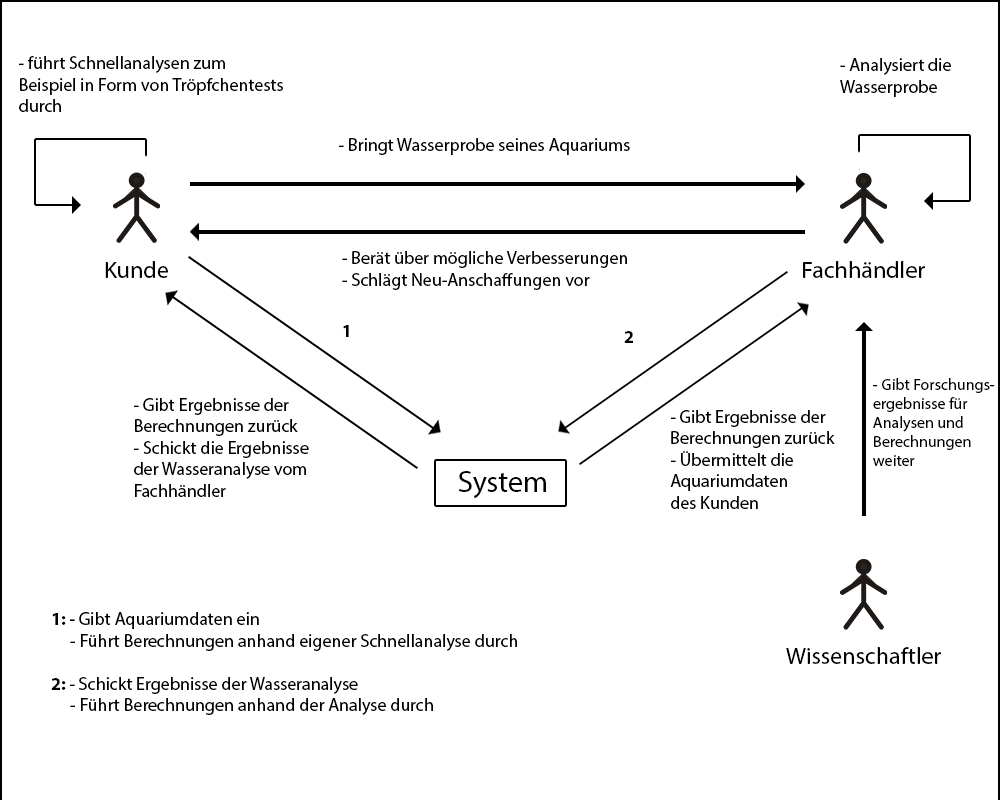
<style>
.page{position:relative;width:1000px;height:800px;background:#ffffff}
.page>*{position:absolute;margin:0}
.t1{font:18px "MyriadPro-Regular";color:#000000}
.t2{font:23.8px "MyriadPro-Regular";color:#000000}
.t3{font:23.9px "MyriadPro-Regular";color:#000000}
.t4{font:18px "MyriadPro-Bold";color:#000000}
.t5{font:16px "MyriadPro-Regular";color:#000000}
.t6{font:30px "MyriadPro-Regular";color:#000000}
</style>
<div class="page">
<p class="t1" style="left:19px;top:56px;width:264px;height:56px">- führt Schnellanalysen zum<br>Beispiel in Form von Tröpfchentests<br>durch</p>
<p class="t1" style="left:840px;top:58px;width:111px;height:39px">- Analysiert die <br>Wasserprobe</p>
<p class="t1" style="left:339px;top:138px;width:291px;height:17px">- Bringt Wasserprobe seines Aquariums</p>
<p class="t1" style="left:342px;top:251px;width:285px;height:39px">- Berät über mögliche Verbesserungen<br>- Schlägt Neu-Anschaffungen vor</p>
<p class="t2" style="left:105px;top:261px;width:63px;height:17px">Kunde</p>
<p class="t3" style="left:803px;top:261px;width:122px;height:17px">Fachhändler</p>
<p class="t4" style="left:343px;top:325px;width:6px;height:12px">1</p>
<p class="t4" style="left:624px;top:331px;width:9px;height:12px">2</p>
<p class="t5" style="left:873px;top:378px;width:122px;height:88px">- Gibt Forschungs-<br>ergebnisse für <br>Analysen und <br>Berechnungen<br>weiter</p>
<p class="t1" style="left:134px;top:398px;width:175px;height:99px">- Gibt Ergebnisse der <br>Berechnungen zurück<br>- Schickt die Ergebnisse<br>der Wasseranalyse vom <br>Fachhändler</p>
<p class="t1" style="left:670px;top:410px;width:165px;height:99px">- Gibt Ergebnisse der<br>Berechnungen zurück<br>- Übermittelt die <br>Aquariumdaten<br>des Kunden</p>
<p class="t6" style="left:458px;top:471px;width:88px;height:28px">System</p>
<p class="t1" style="left:51px;top:612px;width:466px;height:103px"><span class="t4">1: - </span>Gibt Aquariumdaten ein<br>     - Führt Berechnungen anhand eigener Schnellanalyse durch<br><br><span class="t4">2: </span>- Schickt Ergebnisse der Wasseranalyse<br>     - Führt Berechnungen anhand der Analyse durch</p>
<p class="t3" style="left:786px;top:647px;width:155px;height:17px">Wissenschaftler</p>
</div>
